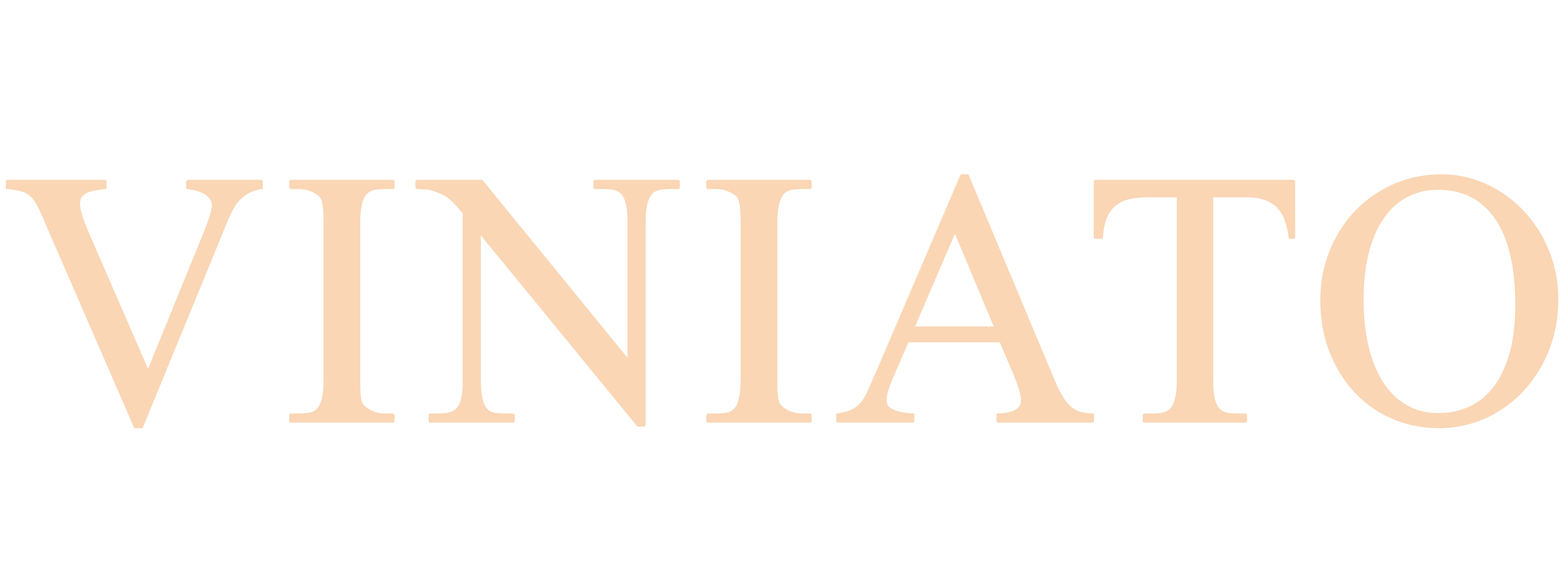
<style>
.page{position:relative;width:1568px;height:588px;background:#ffffff}
.page>*{position:absolute;margin:0}
.t1{font:541.7px "Microsoft-Himalaya";color:#fad6b5;text-transform:uppercase;font-weight:bold}
</style>
<div class="page">
<p class="t1" style="left:5px;top:174px;width:1554px;height:254px">VINIATO</p>
</div>
